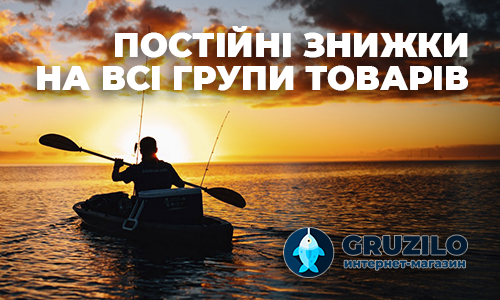
<style>
.page{position:relative;width:500px;height:300px}
.page>*{position:absolute;margin:0}
.t1{font:33.3px/33.3px "Montserrat-Black";color:#ffffff}
</style>
<div class="page">
<p class="t1" style="left:37px;top:26px;width:431px;height:65px;text-align:right">ПОСТІЙНІ ЗНИЖКИ<br>НА ВСІ ГРУПИ ТОВАРІВ</p>
</div>
